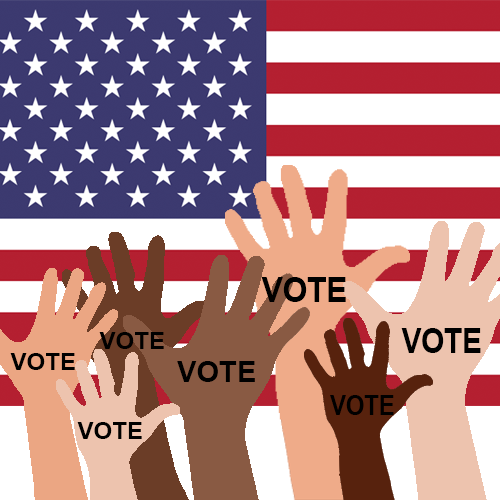
<style>
.page{position:relative;width:500px;height:500px;background:#ffffff}
.page>*{position:absolute;margin:0}
.t1{font:35px "Arial-BoldMT";color:#000000;scale:0.9 1}
.t2{font:34.4px "Arial-BoldMT";color:#000000;scale:0.86 1}
.t3{font:24px "Arial-BoldMT";color:#000000}
.t4{font:29.2px "Arial-BoldMT";color:#000000}
.t5{font:27.6px "Arial-BoldMT";color:#000000;scale:0.86 1}
</style>
<div class="page">
<p class="t1" style="left:261px;top:277px;width:85px;height:25px">VOTE</p>
<p class="t2" style="left:401px;top:328px;width:80px;height:25px">VOTE</p>
<p class="t3" style="left:99px;top:332px;width:65px;height:17px">VOTE</p>
<p class="t3" style="left:10px;top:353px;width:65px;height:17px">VOTE</p>
<p class="t4" style="left:177px;top:361px;width:78px;height:21px">VOTE</p>
<p class="t5" style="left:330px;top:395px;width:64px;height:20px">VOTE</p>
<p class="t3" style="left:77px;top:422px;width:65px;height:17px">VOTE</p>
</div>
